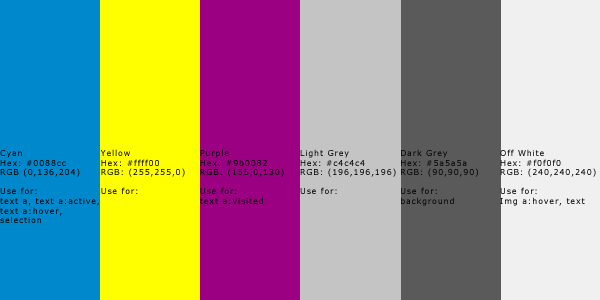
<style>
.page{position:relative;width:600px;height:300px}
.page>*{position:absolute;margin:0}
.t1{font:8px "Verdana";letter-spacing:0.1em;color:#000000}
</style>
<div class="page">
<p class="t1" style="left:0px;top:150px;width:99px;height:73px">Cyan<br>Hex: #0088cc<br>RGB (0,136,204)<br><br>Use for:<br>text a, text a:active, text a:hover, <br>selection</p>
<p class="t1" style="left:100px;top:149px;width:85px;height:45px">Yellow<br>Hex: #ffff00<br>RGB: (255,255,0)<br><br>Use for:</p>
<p class="t1" style="left:200px;top:149px;width:84px;height:55px">Purple<br>Hex: #9b0082<br>RGB: (155,0,130)<br><br>Use for:<br>text a:visited</p>
<p class="t1" style="left:300px;top:149px;width:96px;height:45px">Light Grey<br>Hex: #c4c4c4<br>RGB: (196,196,196)<br><br>Use for:</p>
<p class="t1" style="left:401px;top:149px;width:77px;height:57px">Dark Grey<br>Hex: #5a5a5a<br>RGB: (90,90,90)<br><br>Use for:<br>background</p>
<p class="t1" style="left:500px;top:149px;width:96px;height:57px">Off White<br>Hex: #f0f0f0<br>RGB: (240,240,240)<br><br>Use for:<br>Img a:hover, text</p>
</div>
